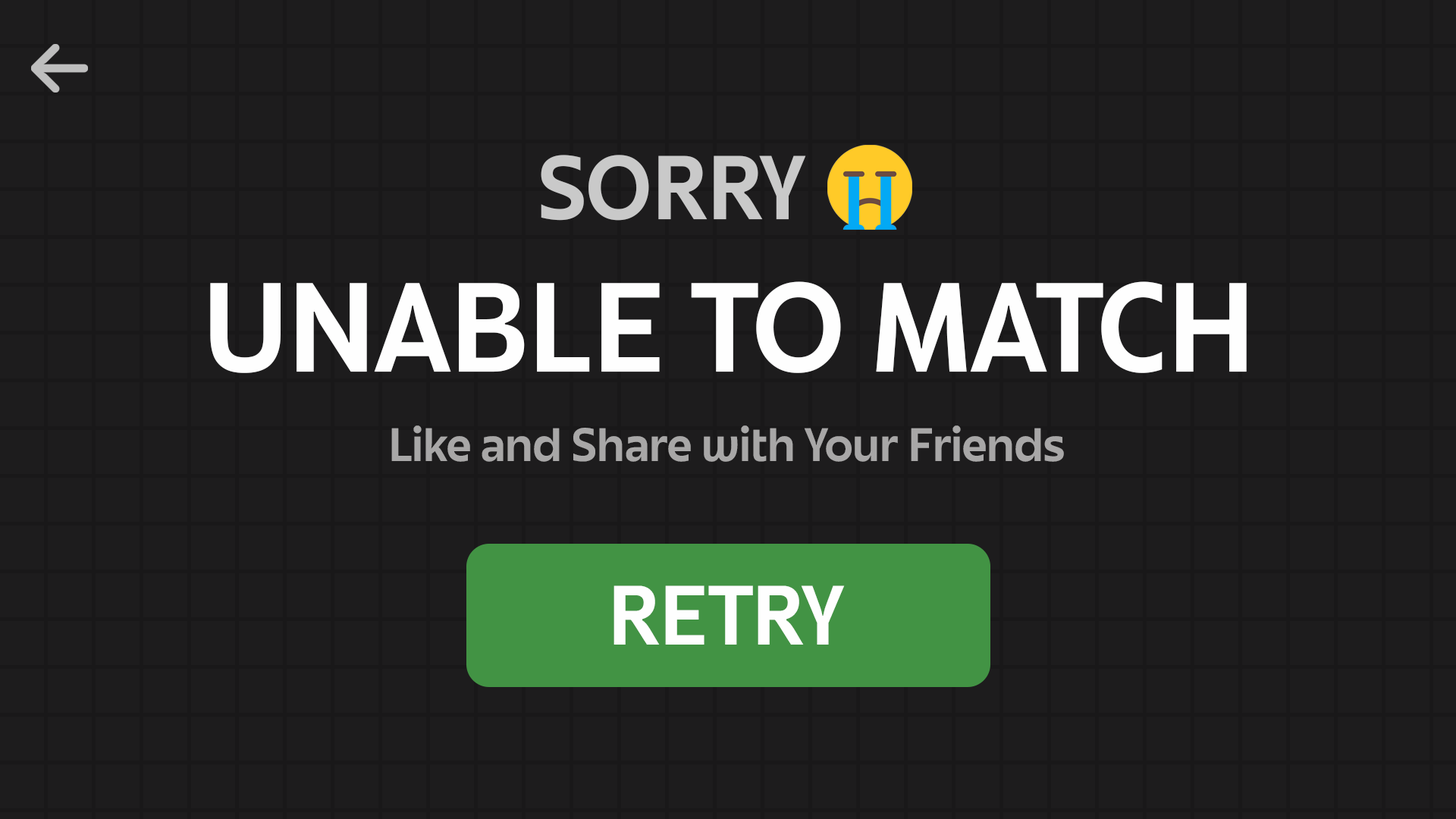
<style>
.page{position:relative;width:1456px;height:819px;background:#1d1c1d}
.page>*{position:absolute;margin:0}
.t1{font:79px "JuneExptVariable-Active";color:#c9c9c9}
.t2{font:110.6px "JuneExptVariable-Active";color:#fefefe}
.t3{font:41.1px "JuneExptVariable-Active";color:#a8a7a7}
.t4{font:73.6px "JuneExptVariable-Active";color:#fefefe}
</style>
<div class="page">
<p class="t1" style="left:541px;top:155px;width:265px;height:66px">SORRY</p>
<p class="t2" style="left:210px;top:281px;width:1037px;height:92px">UNABLE TO MATCH</p>
<p class="t3" style="left:391px;top:425px;width:673px;height:37px">Like and Share with Your Friends</p>
<p class="t4" style="left:613px;top:585px;width:232px;height:60px">RETRY</p>
</div>
